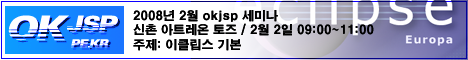
<style>
.page{position:relative;width:468px;height:60px;background:#ffffff}
.page>*{position:absolute;margin:0}
.t1{font:12px "H2gtrE";color:#000000}
</style>
<div class="page">
<p class="t1" style="left:133px;top:10px;width:241px;height:41px">2008년 2월 okjsp 세미나<br>신촌 아트레온 토즈 / 2월 2일 09:00~11:00<br>주제: 이클립스 기본</p>
</div>
